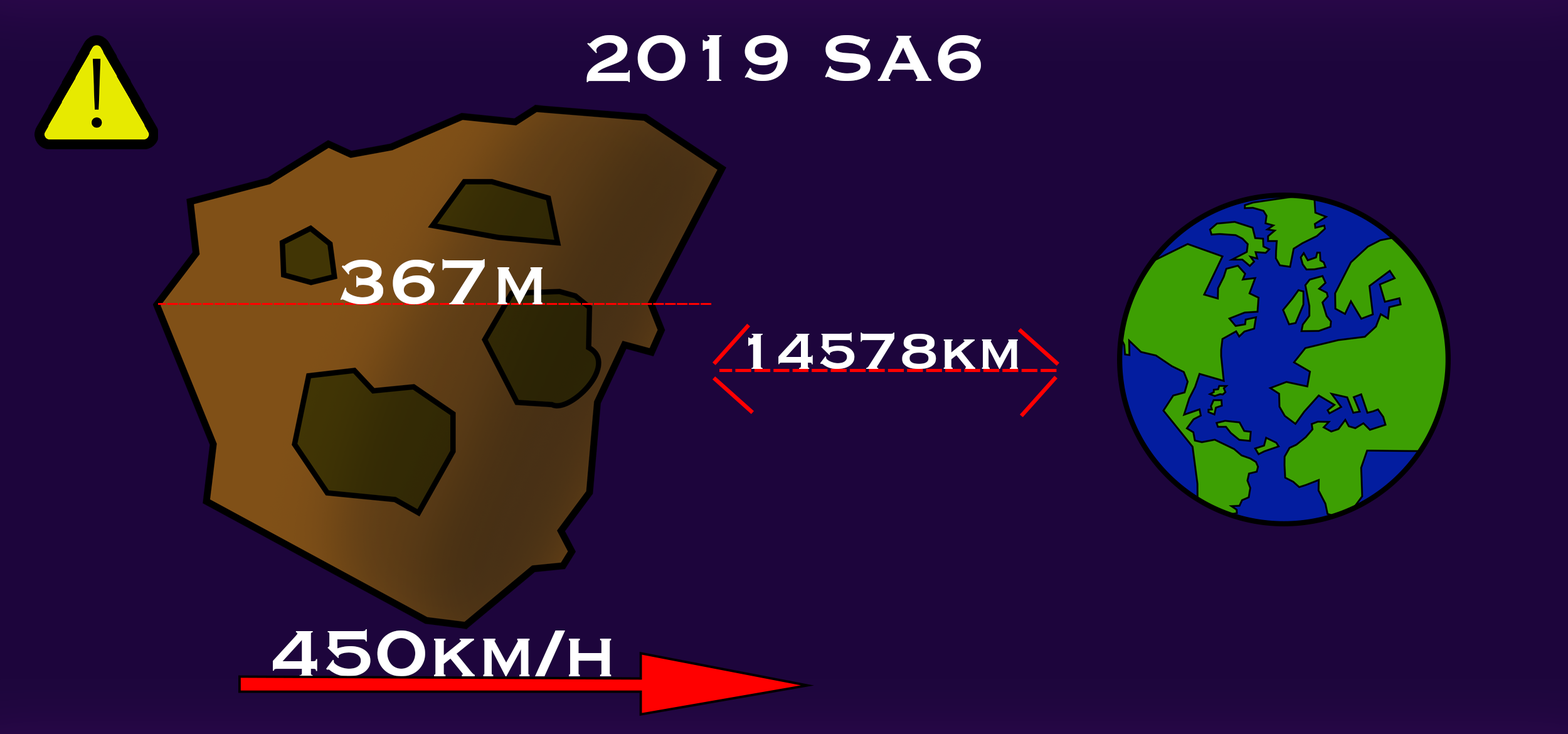
<style>
.page{position:relative;width:1568px;height:734px;background:#1d053c}
.page>*{position:absolute;margin:0}
.t1{font:85.9px "Copperplate";color:#ffffff}
.t2{font:83.4px "Copperplate";color:#ffffff}
.t3{font:66.5px "Copperplate";color:#ffffff}
</style>
<div class="page">
<p class="t1" style="left:586px;top:35px;width:396px;height:47px">2019 SA6</p>
<p class="t2" style="left:340px;top:259px;width:203px;height:45px">367m</p>
<p class="t3" style="left:748px;top:332px;width:270px;height:37px">14578km</p>
<p class="t1" style="left:273px;top:629px;width:339px;height:47px">450km/h</p>
</div>
